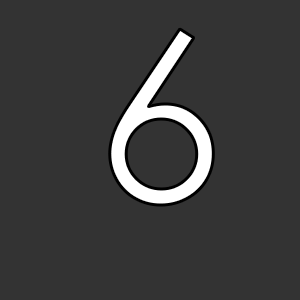
<style>
.page{position:relative;width:300px;height:300px;background:#333333}
.page>*{position:absolute;margin:0}
.t1{font:234px "CenturyGothic";color:#ffffff}
</style>
<div class="page">
<p class="t1" style="left:109px;top:29px;width:105px;height:176px">6</p>
</div>
